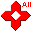
<style>
.page{position:relative;width:32px;height:32px;background:#ffffff}
.page>*{position:absolute;margin:0}
.t1{font:7.3px "Verdana";color:#ff0000;font-weight:bold}
</style>
<div class="page">
<p class="t1" style="left:22px;top:2px;width:9px;height:5px">All</p>
</div>
